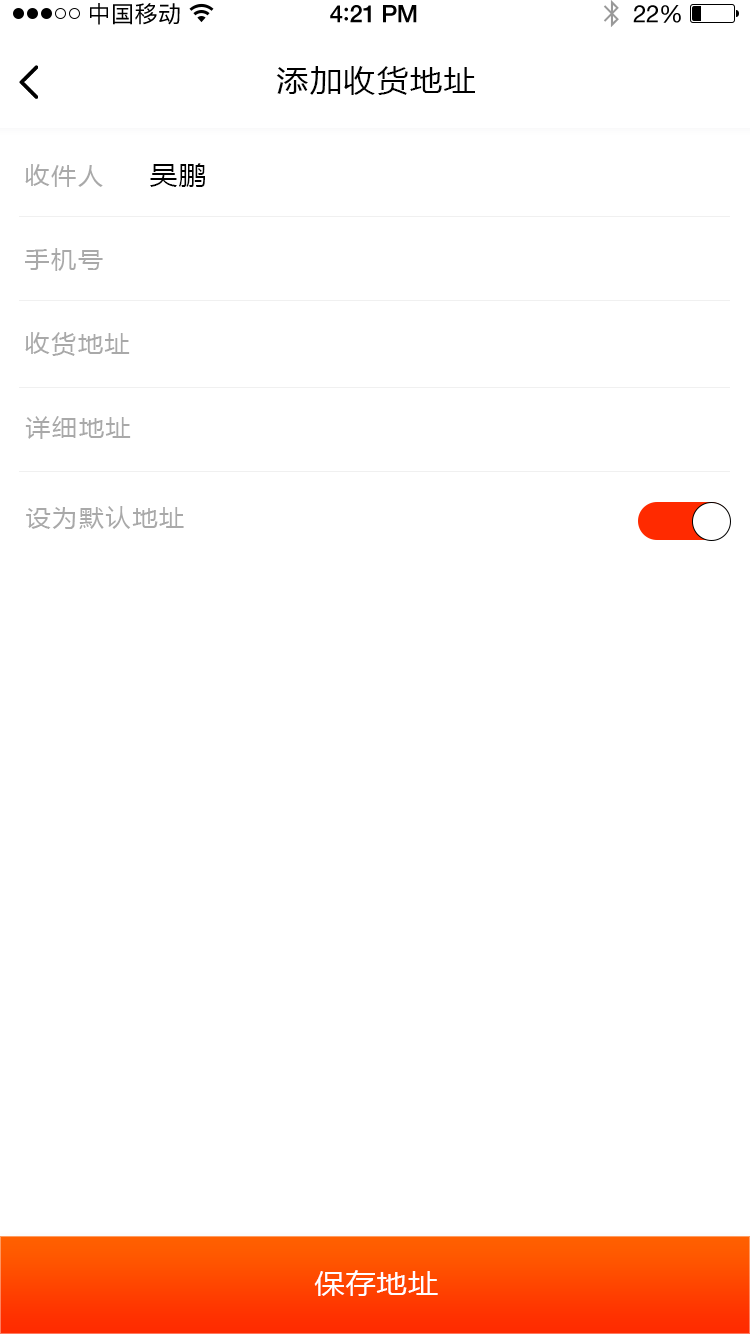
<style>
.page{position:relative;width:750px;height:1334px;background:#ffffff}
.page>*{position:absolute;margin:0}
.t1{font:23px "PingFangSC-Regular";letter-spacing:0.02em;color:#000000}
.t2{font:24px "HelveticaNeue-Medium";letter-spacing:-0.02em;color:#000000}
.t3{font:26px "Avenir-Medium";letter-spacing:-0.02em;color:#000000}
.t4{font:24px "HelveticaNeue";letter-spacing:-0.02em;color:#000000}
.t5{font:30px "MicrosoftYaHei";letter-spacing:0.05em;color:#000000;scale:1.06 1}
.t6{font:24px "MicrosoftYaHei";letter-spacing:0.05em;color:#a9a9a9;scale:1.06 1}
.t7{font:26px "MicrosoftYaHei";letter-spacing:0.05em;color:#000000;scale:1.06 1}
.t8{font:28px "MicrosoftYaHei";letter-spacing:0.05em;color:#ffffff;scale:1.06 1}
</style>
<div class="page">
<p class="t1" style="left:90px;top:3px;width:90px;height:22px">中国移动</p>
<p class="t2" style="left:330px;top:5px;width:87px;height:18px">4<span class="t3">:</span>21 PM</p>
<p class="t4" style="left:633px;top:5px;width:48px;height:18px">22%</p>
<p class="t5" style="left:276px;top:66px;width:199px;height:29px">添加收货地址</p>
<p class="t6" style="left:25px;top:164px;width:78px;height:23px">收件人</p>
<p class="t7" style="left:150px;top:163px;width:55px;height:24px">吴鹏</p>
<p class="t6" style="left:25px;top:248px;width:78px;height:23px">手机号</p>
<p class="t6" style="left:25px;top:332px;width:105px;height:24px">收货地址</p>
<p class="t6" style="left:25px;top:416px;width:106px;height:23px">详细地址</p>
<p class="t6" style="left:26px;top:506px;width:158px;height:23px">设为默认地址</p>
<p class="t8" style="left:314px;top:1270px;width:124px;height:26px">保存地址</p>
</div>
